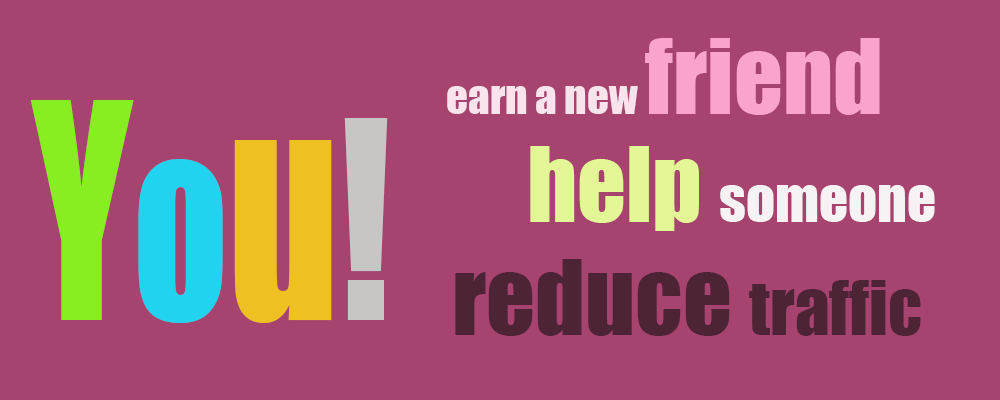
<style>
.page{position:relative;width:1000px;height:400px;background:#a6436f}
.page>*{position:absolute;margin:0}
.t1{font:43px "Impact";color:#f9e4ed}
.t2{font:96px "Impact";color:#fba4cb}
.t3{font:278.2px "Impact";color:#86ee21;scale:0.76 1}
.t4{font:244px "Impact";color:#21d3ee;scale:0.76 1}
.t5{font:278.2px "Impact";color:#eec021;scale:0.76 1}
.t6{font:255.4px "Impact";color:#c7c6c5;scale:0.76 1}
.t7{font:57px "Impact";color:#f7f3f5}
.t8{font:96px "Impact";color:#e4f796}
.t9{font:69px "Impact";color:#4d2436}
.t10{font:96px "Impact";color:#4d2436}
</style>
<div class="page">
<p class="t1" style="left:447px;top:38px;width:433px;height:77px">earn a new <span class="t2">friend</span></p>
<p class="t3" style="left:30px;top:100px;width:358px;height:223px">Y<span class="t4">o</span><span class="t5">u</span><span class="t6">!</span></p>
<p class="t7" style="left:530px;top:146px;width:405px;height:85px"><span class="t8">help </span>someone</p>
<p class="t9" style="left:455px;top:259px;width:466px;height:77px"><span class="t10">reduce </span>traffic</p>
</div>
